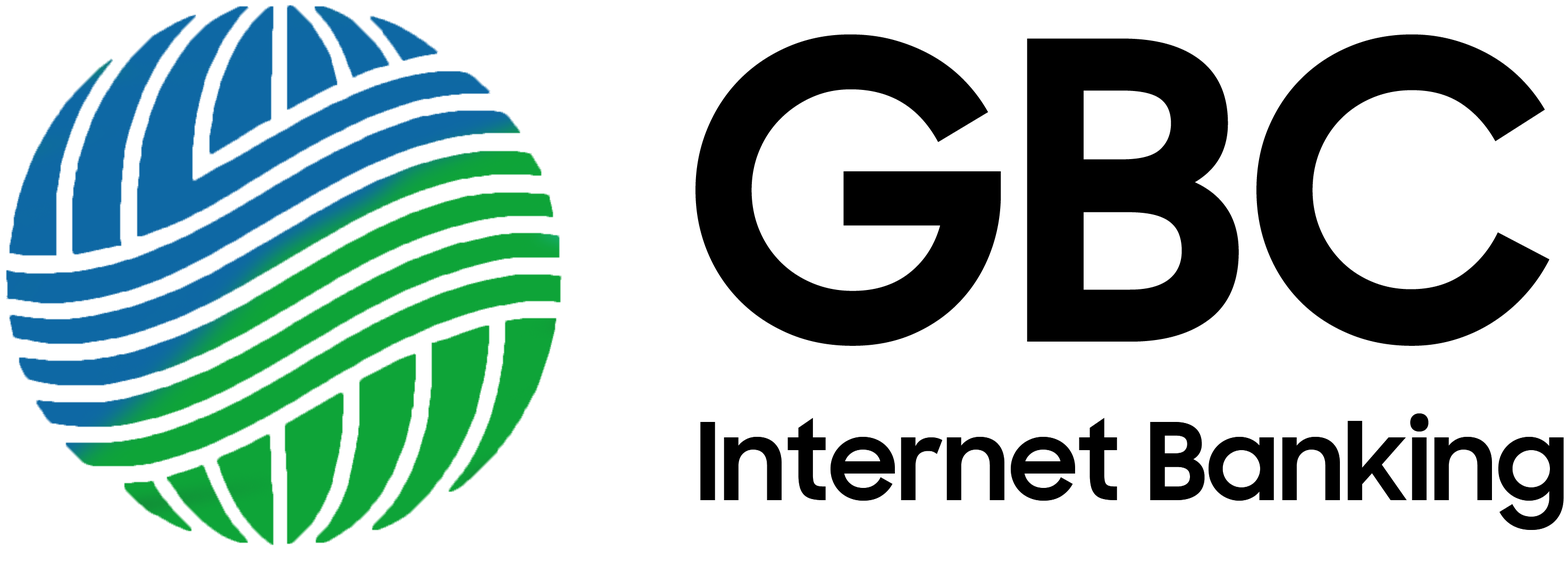
<style>
.page{position:relative;width:1568px;height:564px;background:#ffffff}
.page>*{position:absolute;margin:0}
.t1{font:414.7px "SamsungSharpSans-Bold";color:#000000}
.t2{font:106.3px "SamsungSharpSans-Bold";color:#000000}
</style>
<div class="page">
<p class="t1" style="left:695px;top:34px;width:854px;height:312px">GBC</p>
<p class="t2" style="left:700px;top:413px;width:864px;height:117px">Internet Banking</p>
</div>
